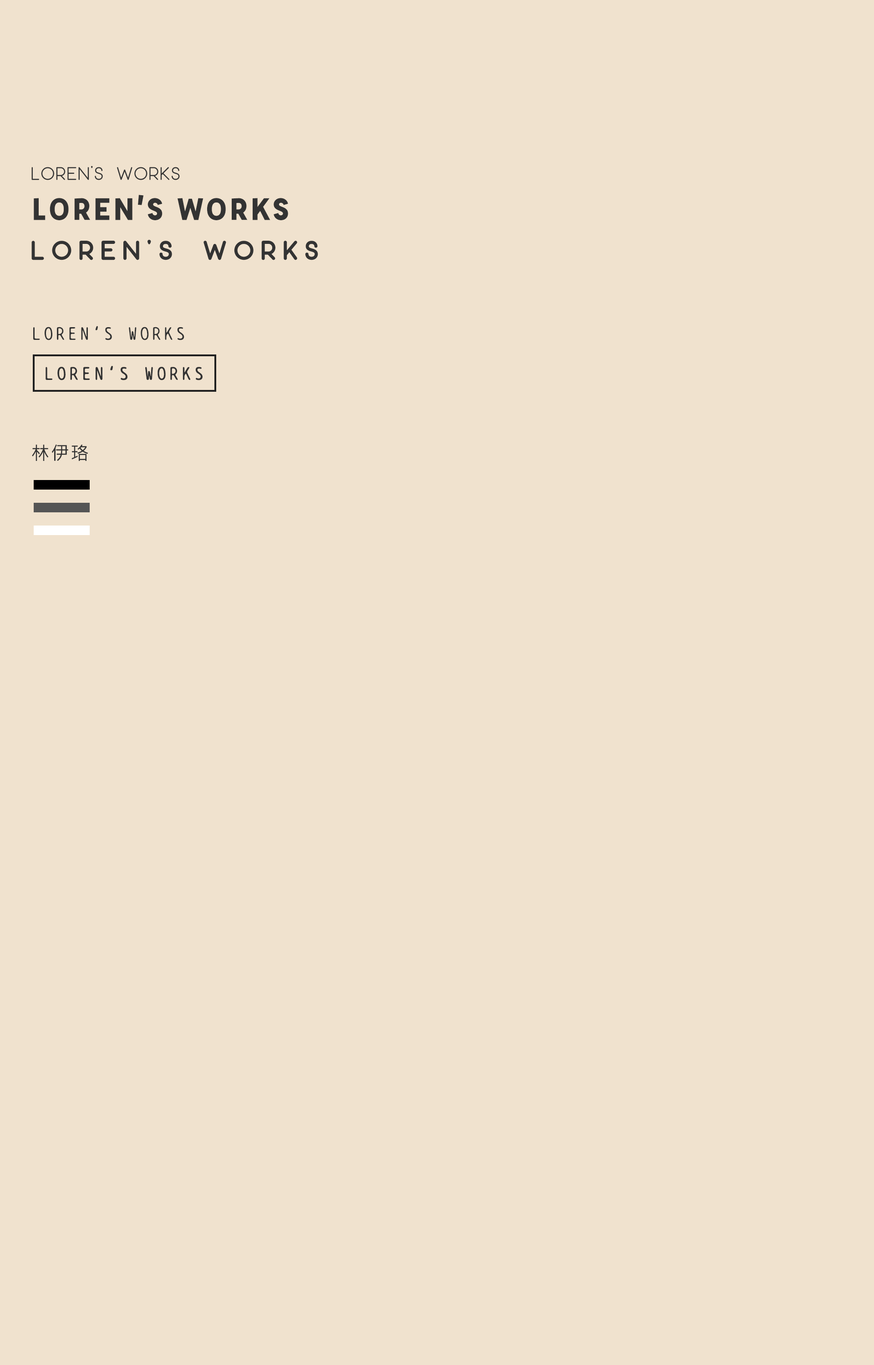
<style>
.page{position:relative;width:874px;height:1365px;background:#f0e2ce}
.page>*{position:absolute;margin:0}
.t1{font:18.2px/40px "Moon2.0-Regular";letter-spacing:0.06em;color:#333333}
.t2{font:18.2px/40px "PTMono-Bold";letter-spacing:0.06em;color:#333333}
.t3{font:34.1px/40px "Affogato-Bold";letter-spacing:0.04em;color:#333333}
.t4{font:27.3px/40px "Moon2.0-Bold";letter-spacing:0.26em;color:#333333}
.t5{font:18.2px/40px "BPtypewrite";letter-spacing:0.06em;color:#333333}
.t6{font:18.2px/40px "BPtypewrite";letter-spacing:0.06em;color:#333333;font-weight:bold}
.t7{font:18.2px/40px "MicrosoftJhengHeiRegular";letter-spacing:0.06em;color:#333333;font-weight:bold}
</style>
<div class="page">
<p class="t1" style="left:31px;top:166px;width:287px;height:295px"><span class="t2"><br></span>LOREN’S WORKS<br><span class="t3">LOREN’S WORKS<br></span><span class="t4">LOREN’S WORKS<br><br></span><span class="t5">LOREN’S WORKS<br></span><span class="t6"> LOREN’S WORKS<br><br></span><span class="t7">林伊珞</span></p>
</div>
